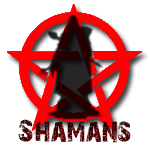
<style>
.page{position:relative;width:150px;height:150px;background:#ffffff}
.page>*{position:absolute;margin:0}
.t1{font:30px "28DaysLater"}
</style>
<div class="page">
<p class="t1" style="left:18px;top:119px;width:113px;height:24px">Shamans</p>
</div>
